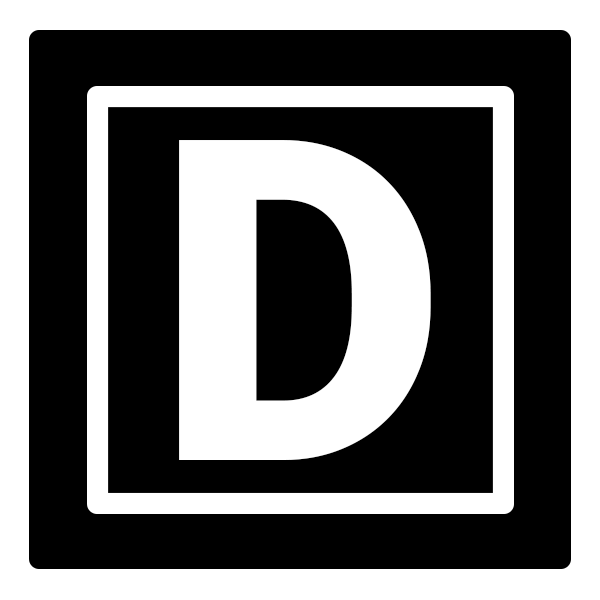
<style>
.page{position:relative;width:600px;height:600px;background:#000000}
.page>*{position:absolute;margin:0}
.t1{font:450px "Roboto-Black";color:#ffffff}
</style>
<div class="page">
<p class="t1" style="left:179px;top:140px;width:252px;height:320px">D</p>
</div>
